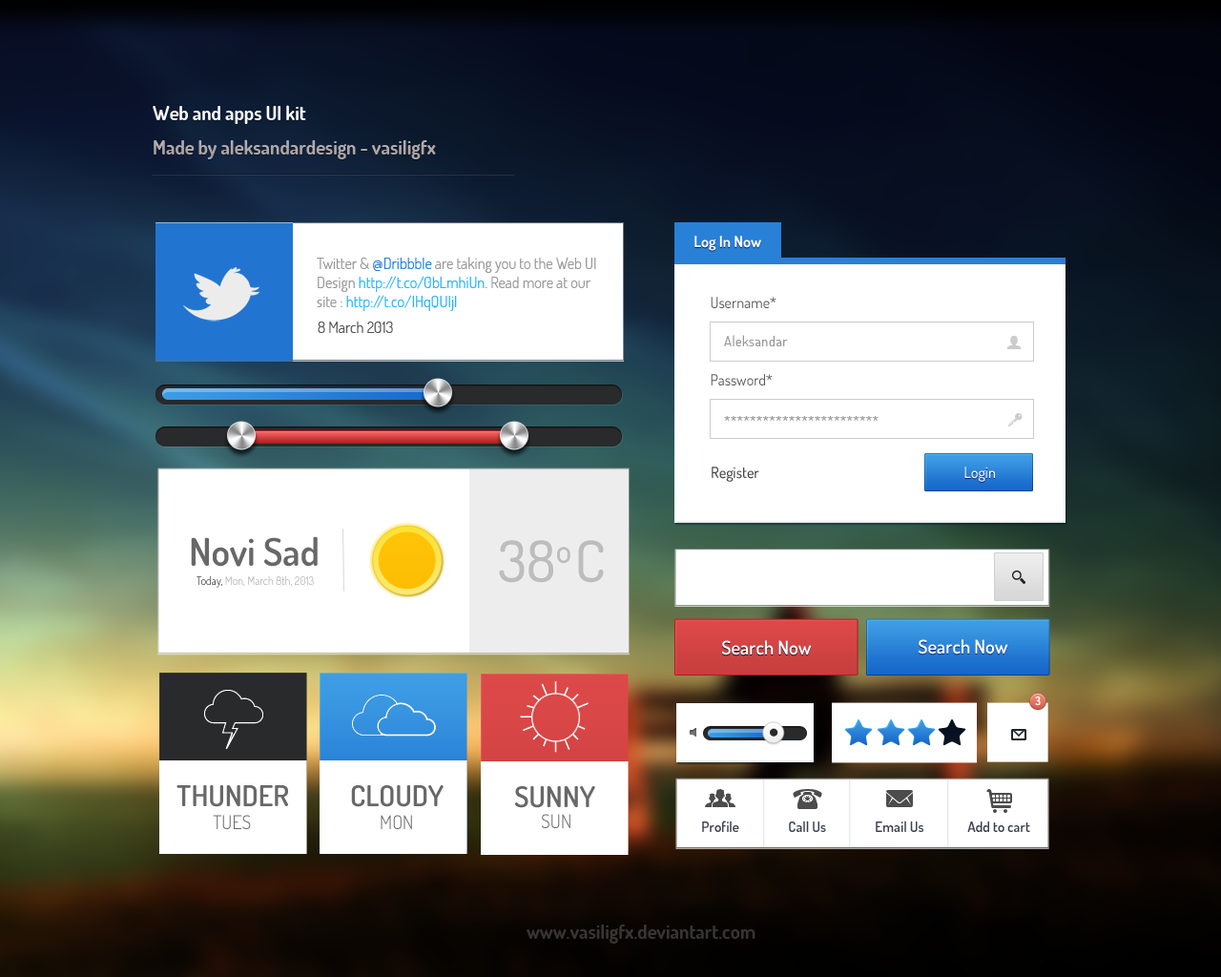
<style>
.page{position:relative;width:1221px;height:977px;background:#ffffff}
.page>*{position:absolute;margin:0}
.t1{font:19.1px/34.3px "TerminalDosis-Bold"}
.t2{font:15.3px "TerminalDosis-Bold";color:#ffffff}
.t3{font:15.3px/19.1px "TerminalDosis-Regular";color:#999999}
.t4{font:15.3px/19.1px "TerminalDosis-Regular";color:#2980d7}
.t5{font:15.3px/19.1px "TerminalDosis-Regular";color:#24b4ff}
.t6{font:15.3px "TerminalDosis-Regular";color:#555555}
.t7{font:14.3px "TerminalDosis-Regular";letter-spacing:0.02em;color:#999999}
.t8{font:15.3px "TerminalDosis-Medium";color:#444444}
.t9{font:15.3px "TerminalDosis-Medium";color:#ffffff}
.t10{font:38.2px "TerminalDosis-SemiBold";color:#686868}
.t11{font:57.2px "TerminalDosis-Medium";color:#bdbdbd}
.t12{font:57.2px "TerminalDosis-Medium";letter-spacing:-0.14em;color:#bdbdbd}
.t13{font:11.4px "TerminalDosis-Light"}
.t14{font:19.1px "TerminalDosis-SemiBold";color:#ffffff}
.t15{font:11.4px "TerminalDosis-SemiBold";color:#ffffff}
.t16{font:28.6px "TerminalDosis-SemiBold";color:#686868}
.t17{font:19.1px "TerminalDosis-Light";color:#686868}
.t18{font:14.3px "TerminalDosis-SemiBold";color:#39404e}
.t19{font:19.1px "TerminalDosis-Bold";color:#373533}
</style>
<div class="page">
<p class="t1" style="left:153px;top:105px;width:283px;height:54px">Web and apps UI kit<br>Made by aleksandardesign - vasiligfx</p>
<p class="t2" style="left:694px;top:236px;width:67px;height:15px">Log In Now</p>
<p class="t3" style="left:317px;top:257px;width:279px;height:54px">Twitter &amp; <span class="t4">@Dribbble </span>are taking you to the Web UI Design <span class="t5">http://t.co/0bLmhiUn. </span>Read more at our<br>site : <span class="t5">http://t.co/lHqQUIjl</span></p>
<p class="t6" style="left:711px;top:297px;width:65px;height:11px">Username*</p>
<p class="t6" style="left:318px;top:321px;width:75px;height:12px">8 March 2013</p>
<p class="t7" style="left:724px;top:335px;width:64px;height:11px">Aleksandar</p>
<p class="t6" style="left:711px;top:374px;width:62px;height:12px">Password*</p>
<p class="t7" style="left:724px;top:416px;width:154px;height:5px">************************</p>
<p class="t8" style="left:712px;top:466px;width:47px;height:16px">Register</p>
<p class="t9" style="left:964px;top:466px;width:31px;height:16px">Login</p>
<p class="t10" style="left:191px;top:536px;width:127px;height:31px">Novi Sad</p>
<p class="t11" style="left:499px;top:540px;width:105px;height:43px">38o<span class="t12"> C</span></p>
<p class="t13" style="left:196px;top:575px;width:118px;height:13px">Today, Mon, March 8th, 2013</p>
<p class="t14" style="left:721px;top:640px;width:91px;height:15px">Search Now</p>
<p class="t14" style="left:918px;top:639px;width:90px;height:15px">Search Now</p>
<p class="t15" style="left:1035px;top:696px;width:6px;height:9px">3</p>
<p class="t16" style="left:176px;top:785px;width:112px;height:22px">THUNDER</p>
<p class="t16" style="left:351px;top:785px;width:93px;height:22px">CLOUDY</p>
<p class="t16" style="left:515px;top:786px;width:80px;height:22px">SUNNY</p>
<p class="t17" style="left:213px;top:815px;width:38px;height:14px">TUES</p>
<p class="t17" style="left:381px;top:815px;width:31px;height:14px">MON</p>
<p class="t17" style="left:542px;top:814px;width:28px;height:14px">SUN</p>
<p class="t18" style="left:702px;top:820px;width:37px;height:12px">Profile</p>
<p class="t18" style="left:789px;top:820px;width:37px;height:12px">Call Us</p>
<p class="t18" style="left:876px;top:820px;width:47px;height:12px">Email Us</p>
<p class="t18" style="left:967px;top:821px;width:63px;height:11px">Add to cart</p>
<p class="t19" style="left:527px;top:924px;width:228px;height:19px">www.vasiligfx.deviantart.com</p>
</div>
